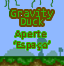
<style>
.page{position:relative;width:64px;height:66px;background:#8fb8ff}
.page>*{position:absolute;margin:0}
.t1{font:10.7px/8px "Consolas";color:#31b70e}
.t2{font:9.9px/11.1px "Calibri";color:#694a01;scale:1.07 1}
</style>
<div class="page">
<p class="t1" style="left:11px;top:9px;width:42px;height:16px;text-align:center">Gravity<br>Duck</p>
<p class="t2" style="left:14px;top:31px;width:36px;height:19px;text-align:center">Aperte <br>‘Espaço’</p>
</div>
